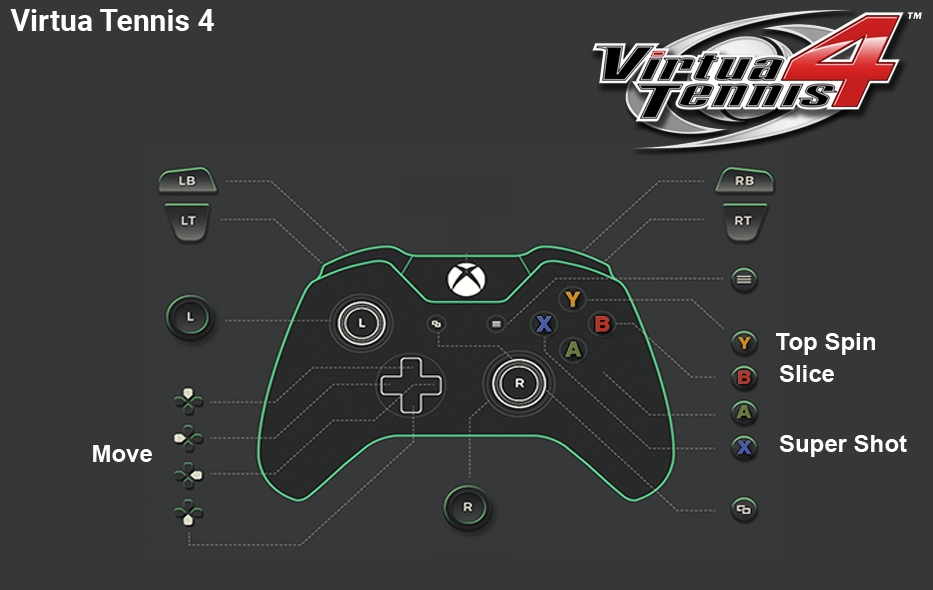
<style>
.page{position:relative;width:933px;height:590px;background:#363838}
.page>*{position:absolute;margin:0}
.t1{font:30px "Roboto-Bold";color:#ffffff}
.t2{font:24px "Arial-BoldMT";color:#fefefe}
</style>
<div class="page">
<p class="t1" style="left:10px;top:9px;width:204px;height:22px">Virtua Tennis 4</p>
<p class="t2" style="left:776px;top:333px;width:99px;height:22px">Top Spin</p>
<p class="t2" style="left:779px;top:365px;width:55px;height:17px">Slice</p>
<p class="t2" style="left:779px;top:435px;width:128px;height:22px">Super Shot</p>
<p class="t2" style="left:93px;top:445px;width:59px;height:17px">Move</p>
</div>
